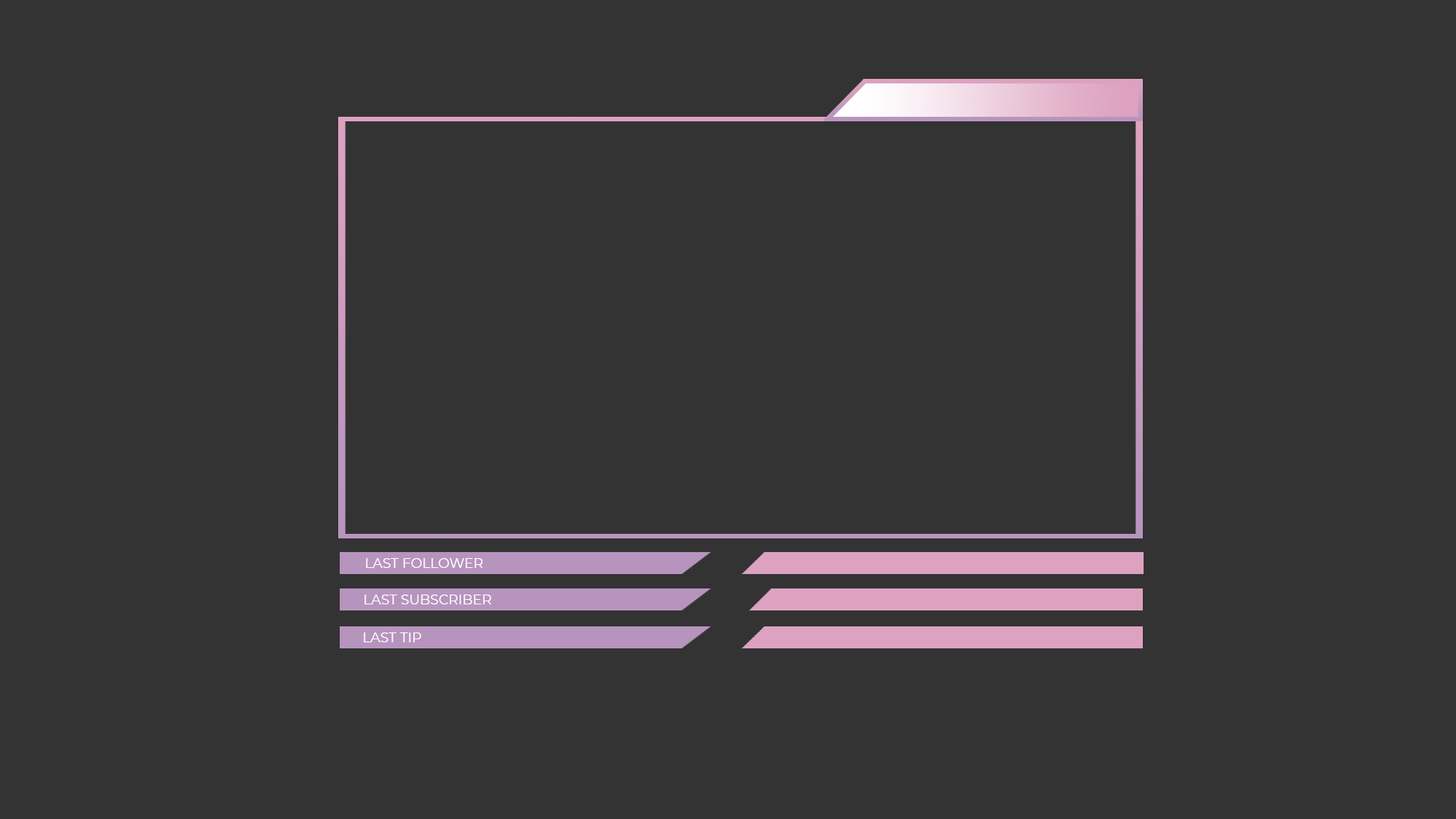
<style>
.page{position:relative;width:1456px;height:819px;background:#333333}
.page>*{position:absolute;margin:0}
.t1{font:13.6px "Montserrat-Regular";color:#ffffff}
</style>
<div class="page">
<p class="t1" style="left:366px;top:558px;width:117px;height:10px">LAST FOLLOWER</p>
<p class="t1" style="left:364px;top:595px;width:127px;height:9px">LAST SUBSCRIBER</p>
<p class="t1" style="left:363px;top:632px;width:59px;height:10px">LAST TIP</p>
</div>
